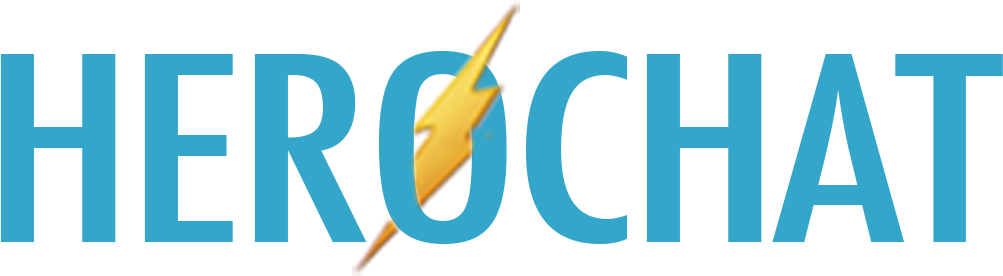
<style>
.page{position:relative;width:1003px;height:276px;background:#ffffff}
.page>*{position:absolute;margin:0}
.t1{font:250px "Futura-CondensedMedium";letter-spacing:-0.025em;color:#33a6c9;scale:1.3 1}
</style>
<div class="page">
<p class="t1" style="left:0px;top:51px;width:1003px;height:193px">HEROCHAT</p>
</div>
